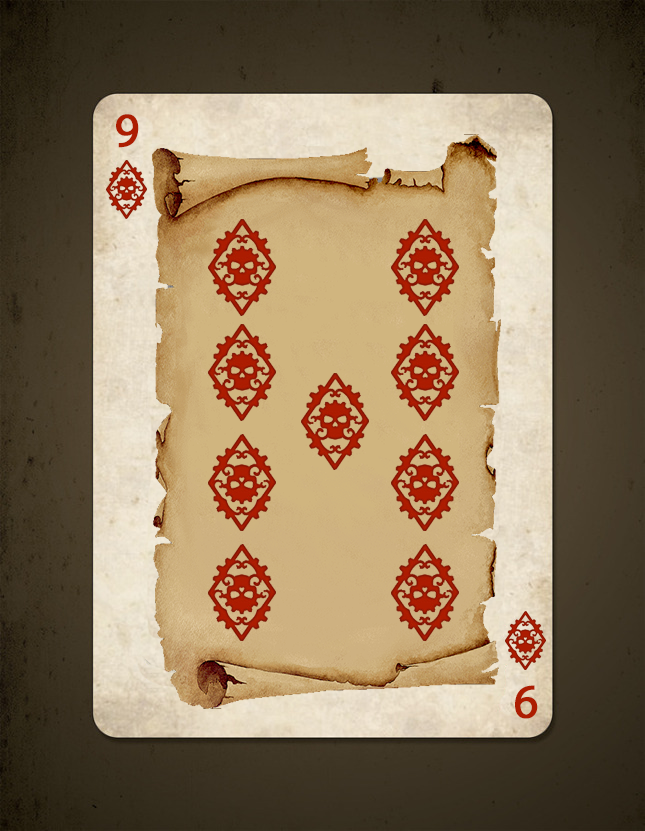
<style>
.page{position:relative;width:645px;height:831px}
.page>*{position:absolute;margin:0}
.t1{font:48px "MyriadPro-Regular";color:#ad1d01;font-weight:bold}
</style>
<div class="page">
<p class="t1" style="left:116px;top:114px;width:23px;height:34px">9</p>
<p class="t1" style="left:515px;top:685px;width:23px;height:34px;rotate:180deg">9</p>
</div>
